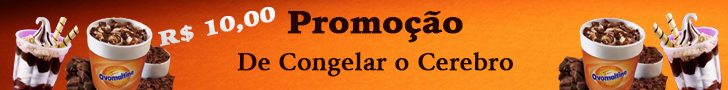
<style>
.page{position:relative;width:728px;height:90px}
.page>*{position:absolute;margin:0}
.t1{font:20px "IowanOldStyle-Black";color:#ededed;font-weight:bold;scale:1.2 1}
.t2{font:32px "IowanOldStyle-Black";color:#240604;font-weight:bold}
.t3{font:24px "IowanOldStyle-Bold";color:#240604;font-weight:bold}
</style>
<div class="page">
<p class="t1" style="left:158px;top:7px;width:117px;height:40px;rotate:-13deg">R$ 10,00</p>
<p class="t2" style="left:287px;top:11px;width:176px;height:32px">Promoção</p>
<p class="t3" style="left:237px;top:52px;width:276px;height:25px">De Congelar o Cerebro</p>
</div>
